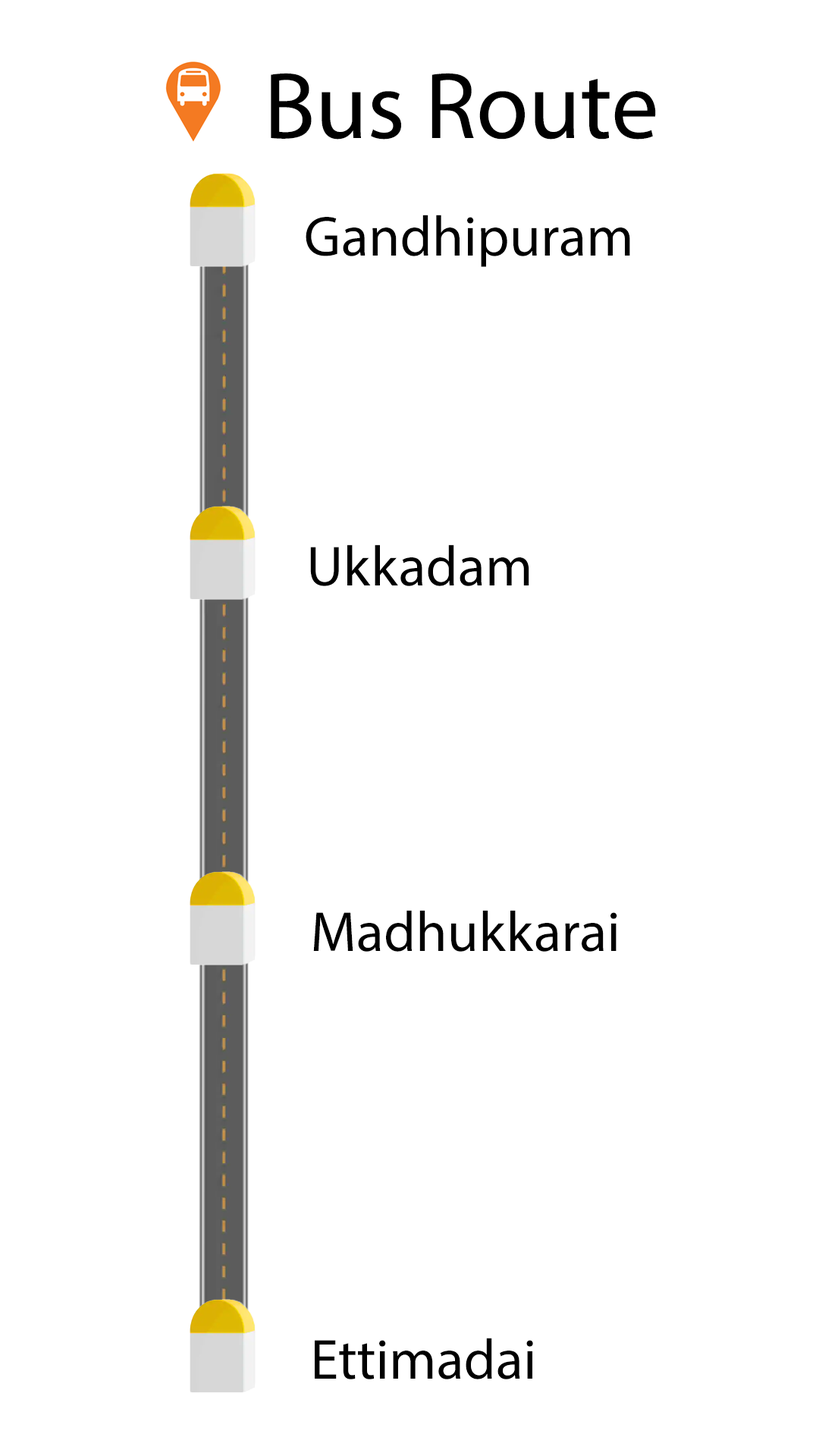
<style>
.page{position:relative;width:819px;height:1456px;background:#ffffff}
.page>*{position:absolute;margin:0}
.t1{font:94.8px "MyriadPro-Regular";color:#000000}
.t2{font:56.9px "MyriadPro-Regular";color:#000000}
</style>
<div class="page">
<p class="t1" style="left:271px;top:73px;width:385px;height:67px">Bus Route</p>
<p class="t2" style="left:306px;top:215px;width:324px;height:52px">Gandhipuram</p>
<p class="t2" style="left:310px;top:544px;width:219px;height:42px">Ukkadam</p>
<p class="t2" style="left:313px;top:910px;width:304px;height:42px">Madhukkarai</p>
<p class="t2" style="left:315px;top:1338px;width:218px;height:41px">Ettimadai</p>
</div>
